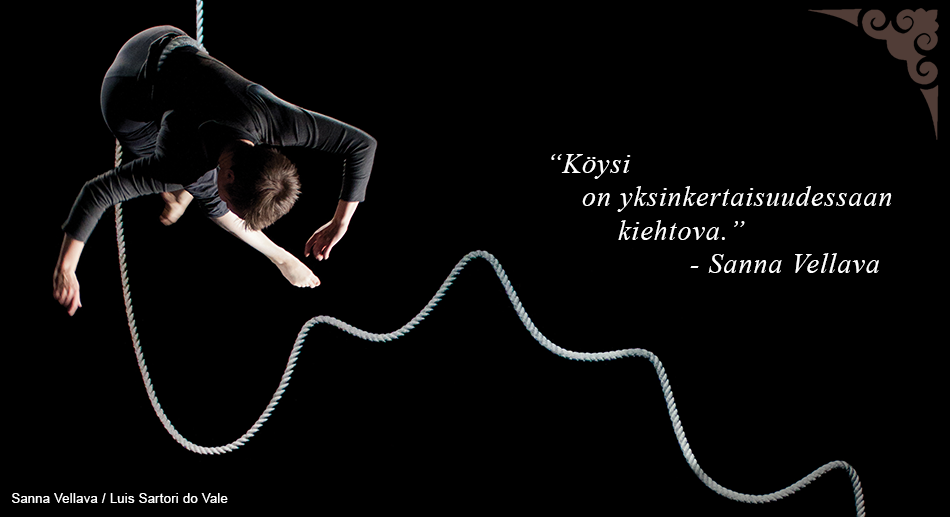
<style>
.page{position:relative;width:950px;height:517px;background:#000000}
.page>*{position:absolute;margin:0}
.t1{font:27.8px "TimesNewRomanPS-ItalicMT";letter-spacing:0.04em;color:#ffffff}
.t2{font:12.5px "ArialMT";letter-spacing:0.04em;color:#ffffff}
</style>
<div class="page">
<p class="t1" style="left:551px;top:154px;width:341px;height:119px">“Köysi<br> on yksinkertaisuudessaan <br>  kiehtova.”<br>    - Sanna Vellava</p>
<p class="t2" style="left:12px;top:493px;width:216px;height:10px">Sanna Vellava / Luis Sartori do Vale</p>
</div>
